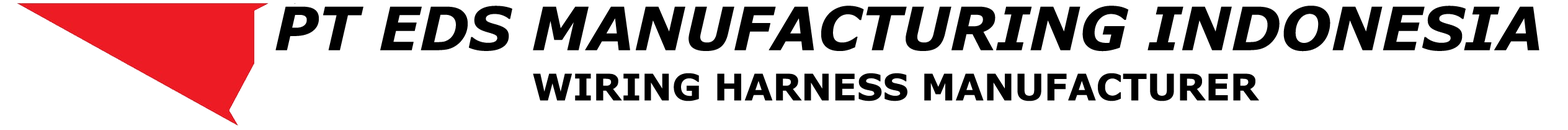
<style>
.page{position:relative;width:1568px;height:130px;background:#ffffff}
.page>*{position:absolute;margin:0}
.t1{font:59.6px "Verdana-BoldItalic";color:#000000}
.t2{font:36.4px "Verdana-Bold";color:#000000}
</style>
<div class="page">
<p class="t1" style="left:275px;top:6px;width:1264px;height:45px">PT EDS MANUFACTURING INDONESIA</p>
<p class="t2" style="left:533px;top:73px;width:726px;height:28px">WIRING HARNESS MANUFACTURER</p>
</div>
